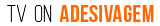
<style>
.page{position:relative;width:160px;height:26px;background:#ffffff}
.page>*{position:absolute;margin:0}
.t1{font:24px "BebasNeueBold";letter-spacing:0.014em;color:#ff6600}
.t2{font:24px "BebasNeueLight";color:#000000}
</style>
<div class="page">
<p class="t1" style="left:7px;top:5px;width:147px;height:17px"><span class="t2">TV  ON  </span>ADESIVAGEM</p>
</div>
